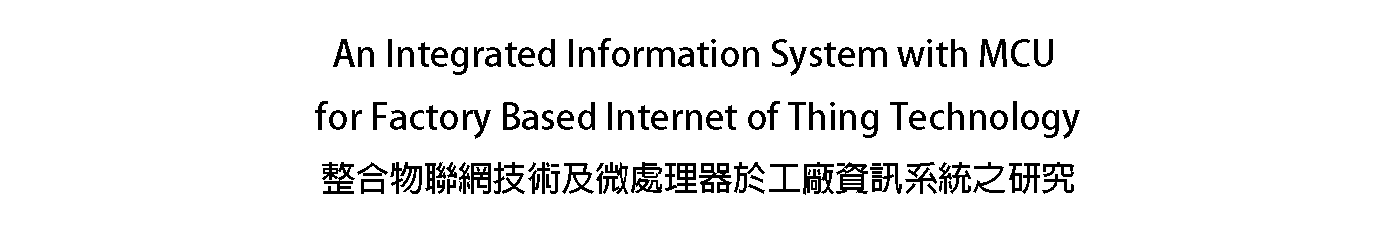
<style>
.page{position:relative;width:1378px;height:228px;background:#ffffff}
.page>*{position:absolute;margin:0}
.t1{font:36px "AdobeFanHeitiStd-Bold";color:#000000}
.t2{font:34.3px "AdobeFanHeitiStd-Bold";color:#000000}
</style>
<div class="page">
<p class="t1" style="left:315px;top:38px;width:765px;height:157px;text-align:center">An Integrated Information System with MCU <br>for Factory Based Internet of Thing Technology<br><span class="t2">整合物聯網技術及微處理器於工廠資訊系統之研究</span></p>
</div>
